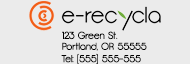
<style>
.page{position:relative;width:190px;height:64px;background:#ebebeb}
.page>*{position:absolute;margin:0}
.t1{font:9.8px "Opificio";color:#000000}
</style>
<div class="page">
<p class="t1" style="left:62px;top:31px;width:56px;height:9px">123 Green St.</p>
<p class="t1" style="left:61px;top:53px;width:80px;height:12px">Tel: (555) 555-555</p>
<p class="t1" style="left:62px;top:42px;width:85px;height:9px">Portland, OR 55555</p>
</div>
